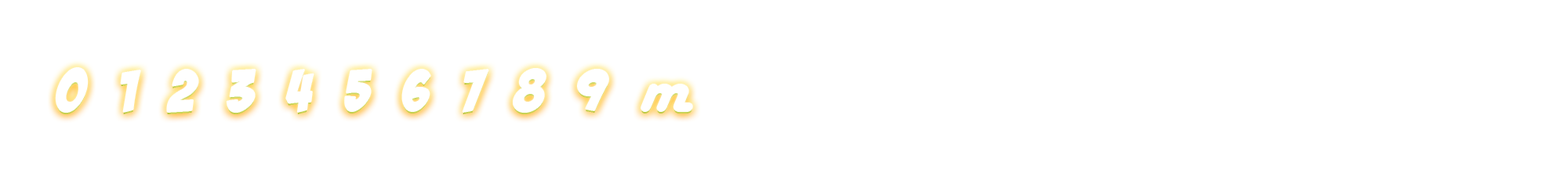
<style>
.page{position:relative;width:1568px;height:176px;background:#ffffff}
.page>*{position:absolute;margin:0}
.t1{font:56.4px "BadaBoomBB";color:#ffffff}
.t2{font:70.6px "HarlowSolid";color:#ffffff}
</style>
<div class="page">
<p class="t1" style="left:56px;top:68px;width:636px;height:44px">0   1   2   3   4   5   6   7   8   9   <span class="t2">m</span></p>
<p class="t1" style="left:56px;top:68px;width:636px;height:44px">0   1   2   3   4   5   6   7   8   9   <span class="t2">m</span></p>
</div>
